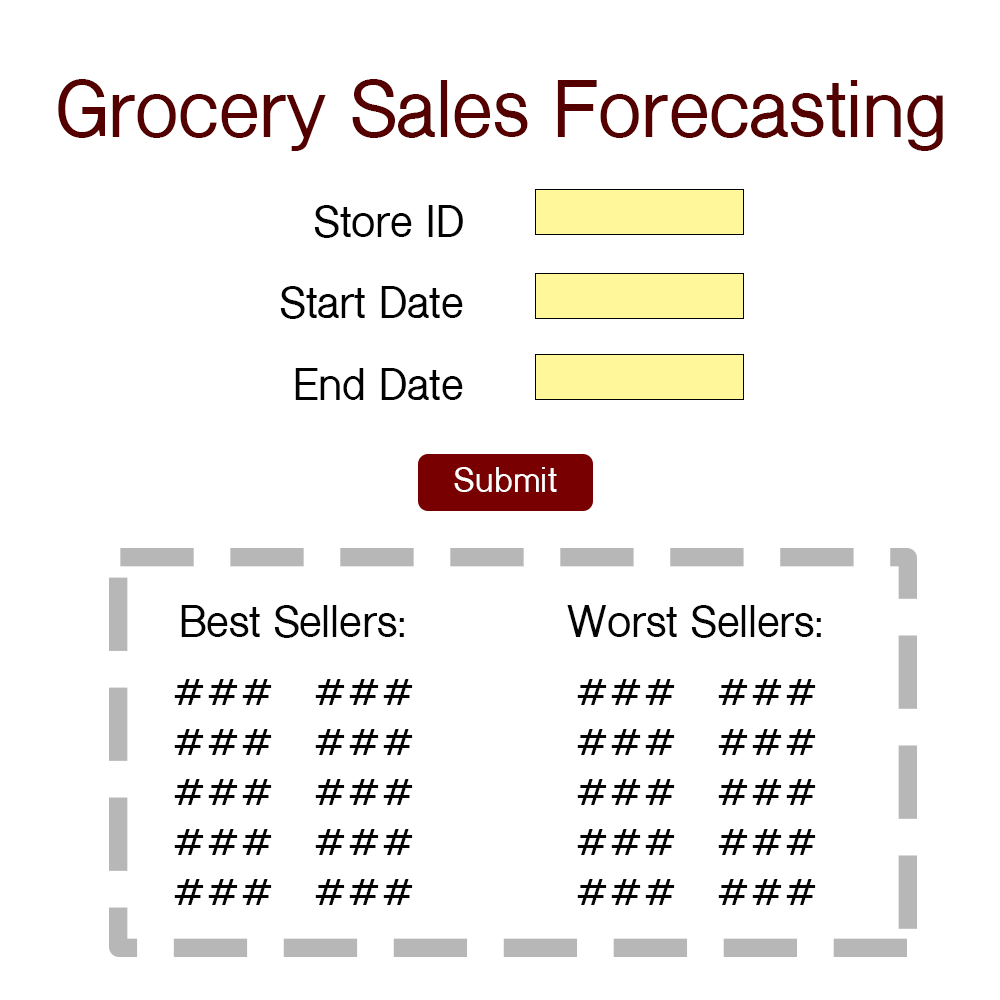
<style>
.page{position:relative;width:1000px;height:1000px;background:#ffffff}
.page>*{position:absolute;margin:0}
.t1{font:75px "ShreeDev0714-Bold";color:#550000}
.t2{font:41.7px "ShreeDev0714-Bold";color:#020202}
.t3{font:33.3px "ShreeDev0714-Bold";color:#fcfefe}
.t4{font:41.7px "ShreeDev0714-Bold";color:#040404}
</style>
<div class="page">
<p class="t1" style="left:58px;top:79px;width:885px;height:72px">Grocery Sales Forecasting</p>
<p class="t2" style="left:314px;top:205px;width:149px;height:33px">Store ID</p>
<p class="t2" style="left:280px;top:286px;width:183px;height:33px">Start Date</p>
<p class="t2" style="left:295px;top:368px;width:168px;height:32px">End Date</p>
<p class="t3" style="left:454px;top:467px;width:103px;height:25px">Submit</p>
<p class="t4" style="left:181px;top:605px;width:223px;height:33px">Best Sellers:</p>
<p class="t4" style="left:567px;top:605px;width:254px;height:33px">Worst Sellers:</p>
<p class="t4" style="left:174px;top:679px;width:239px;height:226px">###   ###<br>###   ###<br>###   ###<br>###   ###<br>###   ###</p>
<p class="t4" style="left:577px;top:679px;width:239px;height:226px">###   ###<br>###   ###<br>###   ###<br>###   ###<br>###   ###</p>
</div>
